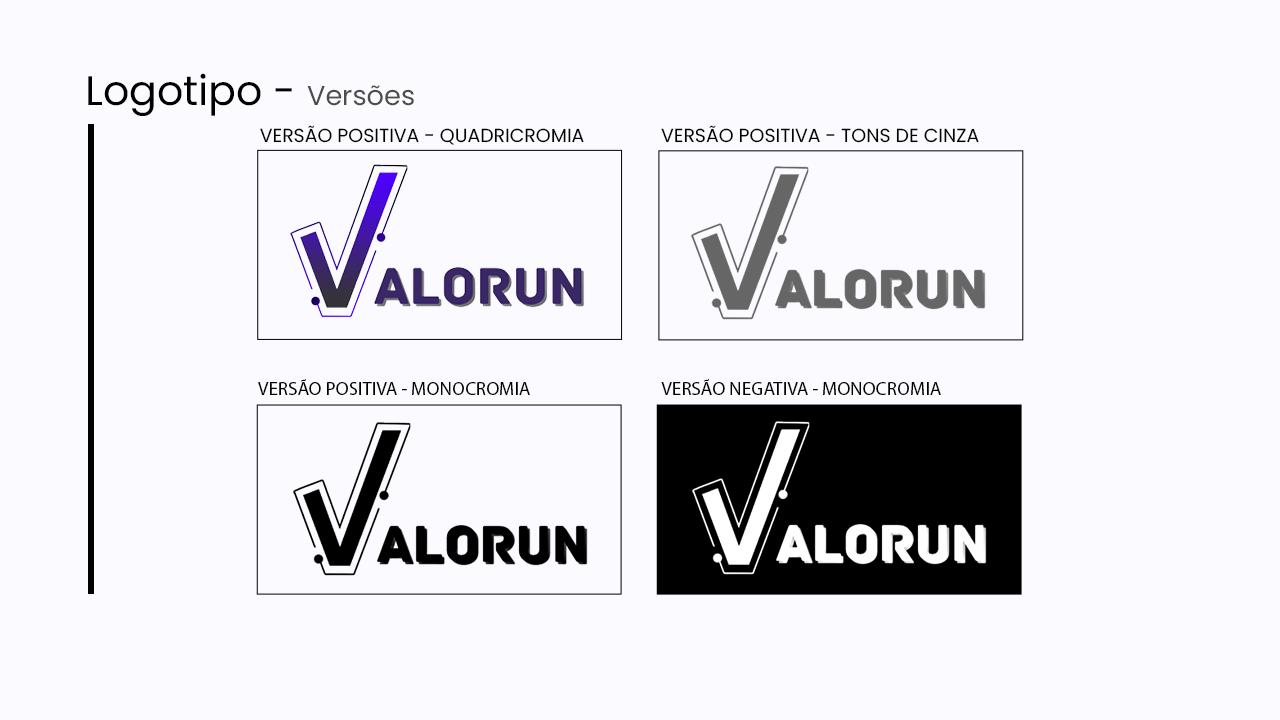
<style>
.page{position:relative;width:1280px;height:720px;background:#fbfbff}
.page>*{position:absolute;margin:0}
.t1{font:41.2px "Poppins-Regular";color:#000000}
.t2{font:27.2px "Poppins-Regular";color:#514c4c}
.t3{font:18.9px "Poppins-Regular";color:#000000}
</style>
<div class="page">
<p class="t1" style="left:88px;top:73px;width:326px;height:43px">Logotipo - <span class="t2">Versões</span></p>
<p class="t3" style="left:260px;top:125px;width:324px;height:20px">VERSÃO POSITIVA - QUADRICROMIA</p>
<p class="t3" style="left:661px;top:125px;width:318px;height:18px">VERSÃO POSITIVA - TONS DE CINZA</p>
<p class="t3" style="left:258px;top:379px;width:272px;height:16px">VERSÃO POSITIVA - MONOCROMIA</p>
<p class="t3" style="left:661px;top:379px;width:280px;height:16px">VERSÃO NEGATIVA - MONOCROMIA</p>
</div>
